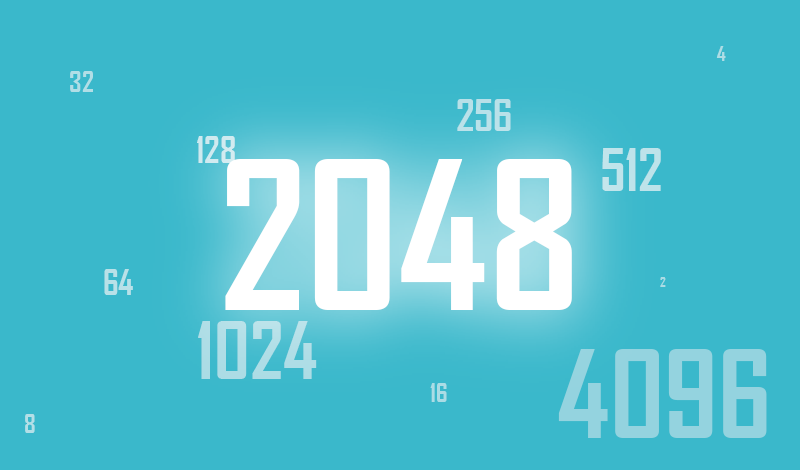
<style>
.page{position:relative;width:800px;height:470px;background:#3ab8cb}
.page>*{position:absolute;margin:0}
.t1{font:19.9px "AgencyFB-Bold";color:#addde5}
.t2{font:27.5px "AgencyFB-Bold";color:#b1dee6}
.t3{font:41.5px "AgencyFB-Bold";color:#b9e1e9}
.t4{font:34.7px "AgencyFB-Bold";color:#cfeaf0}
.t5{font:55.7px "AgencyFB-Bold";color:#bee3ea}
.t6{font:197.9px "AgencyFB-Bold";color:#ffffff}
.t7{font:33.6px "AgencyFB-Bold";color:#b8e1e8}
.t8{font:13px "AgencyFB-Bold";color:#abdce5}
.t9{font:76.2px "AgencyFB-Bold";color:#afdee6}
.t10{font:116.2px "AgencyFB-Bold";color:#94d3df}
.t11{font:25.1px "AgencyFB-Bold";color:#abdce5}
.t12{font:24.7px "AgencyFB-Bold";color:#b3dfe7}
</style>
<div class="page">
<p class="t1" style="left:716px;top:46px;width:10px;height:15px">4</p>
<p class="t2" style="left:70px;top:71px;width:23px;height:21px">32</p>
<p class="t3" style="left:457px;top:99px;width:54px;height:32px">256</p>
<p class="t4" style="left:197px;top:136px;width:38px;height:27px">128</p>
<p class="t5" style="left:602px;top:148px;width:59px;height:43px">512</p>
<p class="t6" style="left:225px;top:159px;width:347px;height:151px">2048</p>
<p class="t7" style="left:104px;top:269px;width:29px;height:26px">64</p>
<p class="t8" style="left:660px;top:277px;width:6px;height:10px">2</p>
<p class="t9" style="left:198px;top:321px;width:119px;height:58px">1024</p>
<p class="t10" style="left:558px;top:349px;width:209px;height:89px">4096</p>
<p class="t11" style="left:430px;top:383px;width:17px;height:19px">16</p>
<p class="t12" style="left:25px;top:414px;width:10px;height:19px">8</p>
</div>
